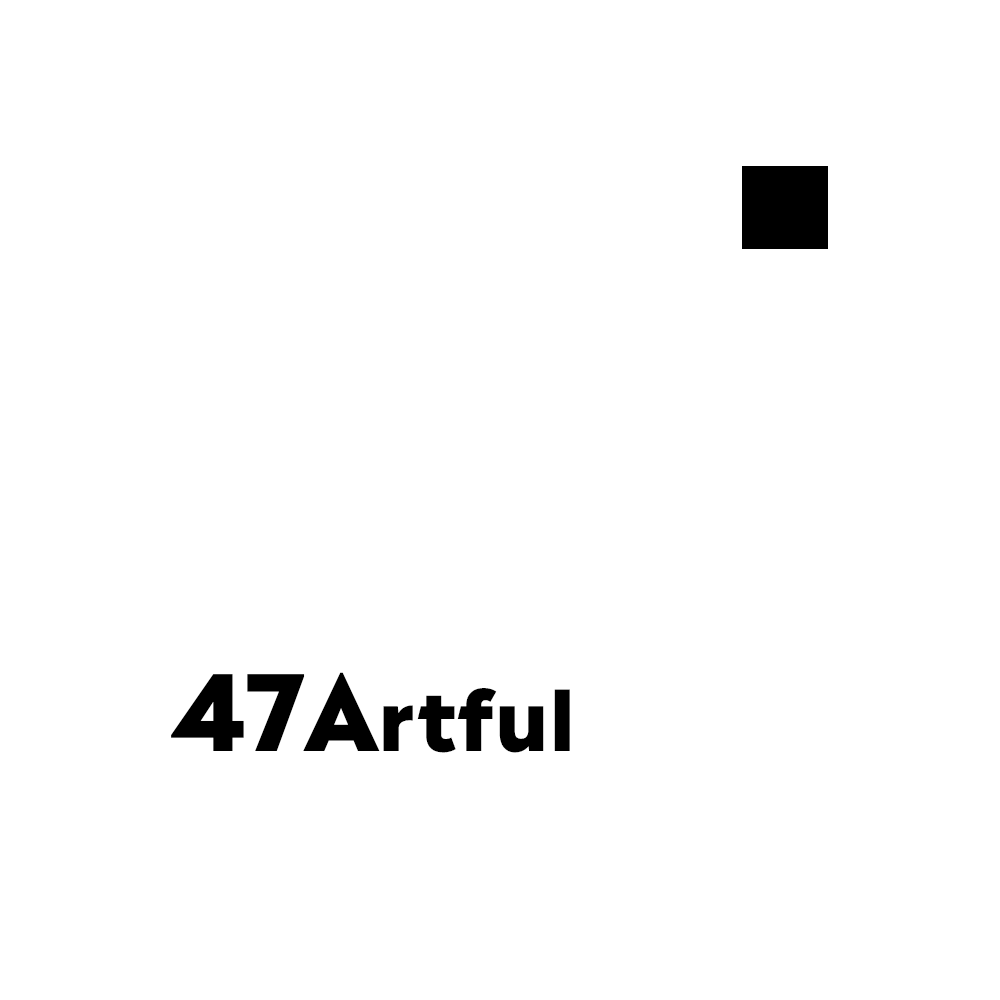
<style>
.page{position:relative;width:1000px;height:1000px;background:#ffffff}
.page>*{position:absolute;margin:0}
.t1{font:83.3px "MaderaW01-ExtraBold";color:#000000}
.t2{font:104.2px "MaderaW01-ExtraBold";color:#000000}
</style>
<div class="page">
<p class="t1" style="left:171px;top:672px;width:399px;height:81px"><span class="t2">47A</span>rtful</p>
</div>
